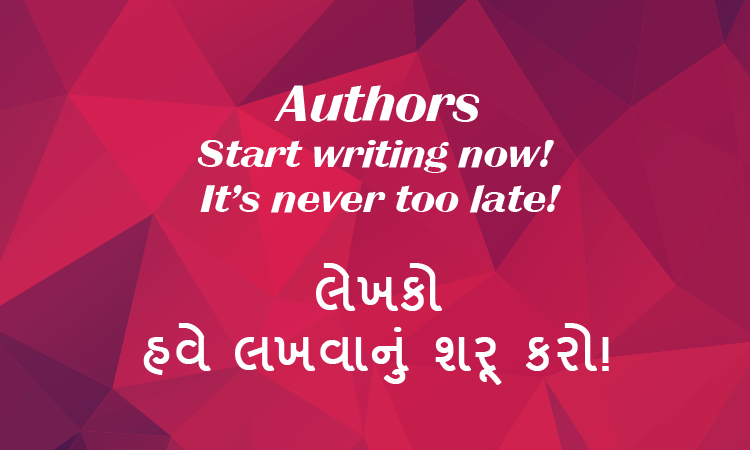
<style>
.page{position:relative;width:750px;height:450px}
.page>*{position:absolute;margin:0}
.t1{font:38px "BritannicBQ-BoldItalic";color:#ffffff}
.t2{font:50px "BritannicBQ-BoldItalic";color:#ffffff}
.t3{font:50px "Shruti";color:#ffffff;font-weight:bold}
</style>
<div class="page">
<p class="t1" style="left:197px;top:85px;width:364px;height:128px;text-align:center"><span class="t2">Authors<br></span>Start writing now! <br>It’s never too late!</p>
<p class="t3" style="left:143px;top:263px;width:466px;height:122px;text-align:center">લેખકો<br>હવે લખવાનું શરૂ કરો!</p>
</div>
